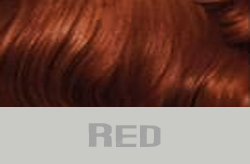
<style>
.page{position:relative;width:250px;height:164px;background:#c9c9c6}
.page>*{position:absolute;margin:0}
.t1{font:34.7px "Mountana-Regular";letter-spacing:-0.05em;color:#a3a3a3;scale:2.24 1}
</style>
<div class="page">
<p class="t1" style="left:88px;top:123px;width:73px;height:24px">Red</p>
</div>
